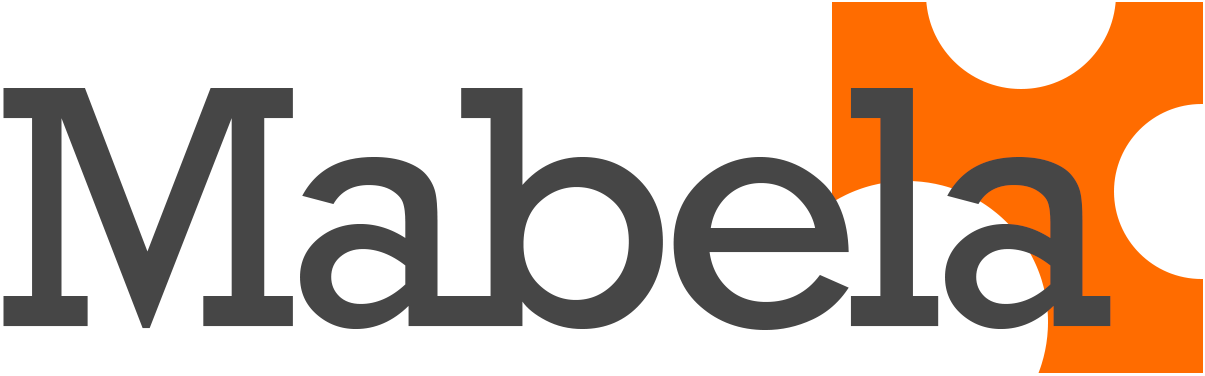
<style>
.page{position:relative;width:1205px;height:376px;background:#ffffff}
.page>*{position:absolute;margin:0}
.t1{font:349.9px "Rockwell";letter-spacing:-0.05em;color:#464646}
</style>
<div class="page">
<p class="t1" style="left:3px;top:88px;width:1108px;height:242px">Mabela</p>
</div>
